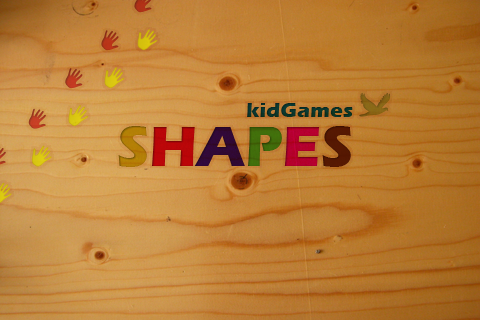
<style>
.page{position:relative;width:480px;height:320px}
.page>*{position:absolute;margin:0}
.t1{font:21.5px "ErasITC-Bold";color:#0b3328}
.t2{font:58.6px "ErasITC-Bold"}
</style>
<div class="page">
<p class="t1" style="left:247px;top:103px;width:106px;height:14px">kidGames</p>
<p class="t2" style="left:118px;top:126px;width:233px;height:41px">SHAPES</p>
</div>
